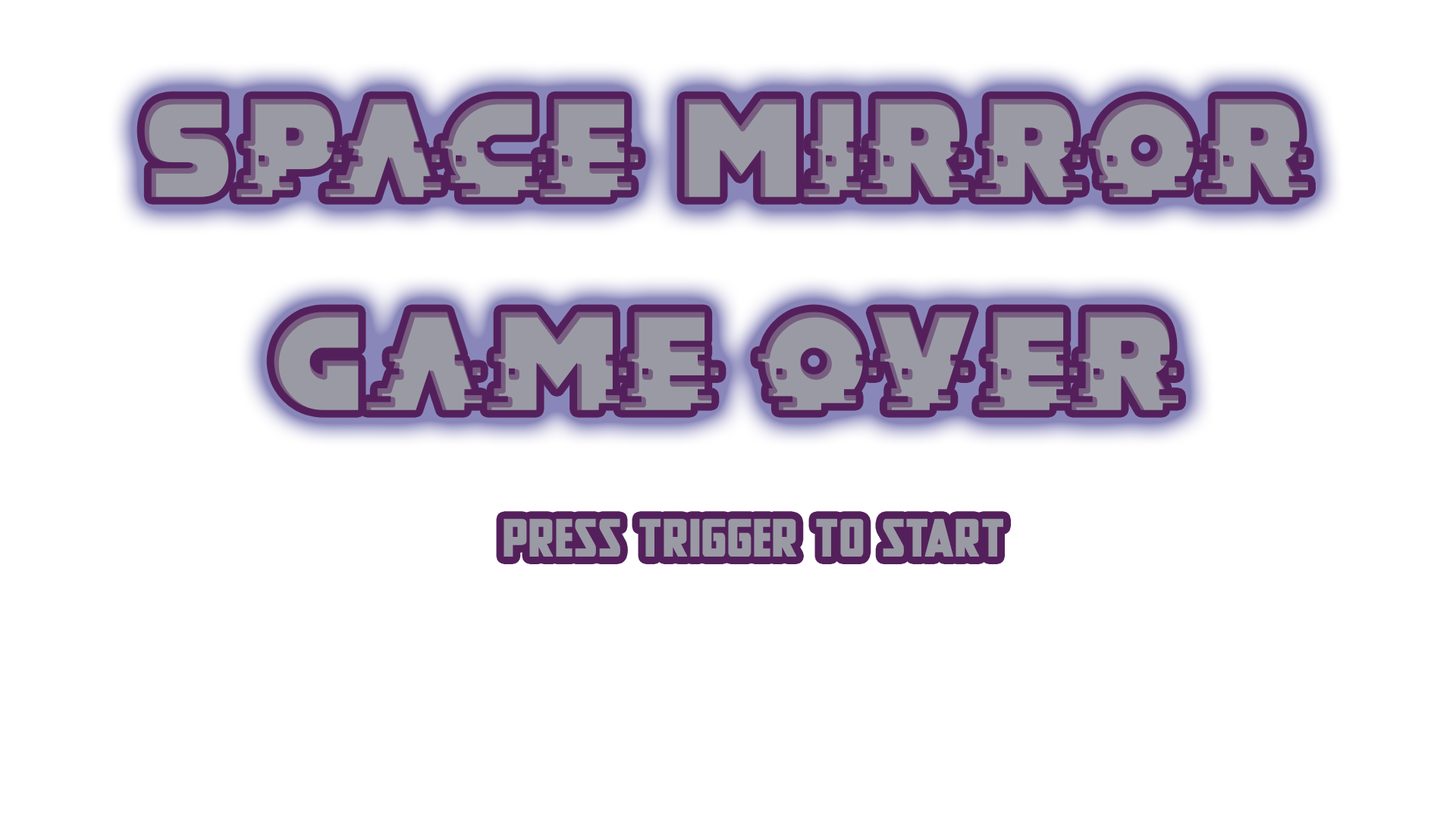
<style>
.page{position:relative;width:1456px;height:819px;background:#ffffff}
.page>*{position:absolute;margin:0}
.t1{font:243.2px "MADhacker";letter-spacing:-0.01em;color:#9a9aa4;font-weight:bold}
.t2{font:89.1px "NewComicTitle";letter-spacing:-0.01em;color:#9a9aa4;font-weight:bold}
</style>
<div class="page">
<p class="t1" style="left:144px;top:99px;width:1164px;height:98px">Space Mirror</p>
<p class="t1" style="left:274px;top:312px;width:904px;height:98px">Game over</p>
<p class="t2" style="left:504px;top:519px;width:499px;height:38px">Press trigger to start</p>
</div>
